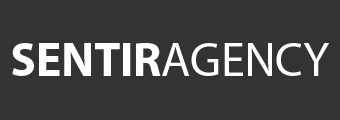
<style>
.page{position:relative;width:340px;height:120px;background:#333333}
.page>*{position:absolute;margin:0}
.t1{font:48.2px "MyriadPro-Bold";letter-spacing:-0.01em;color:#ffffff}
.t2{font:48.2px "MyriadPro-Regular";letter-spacing:-0.01em;color:#ffffff}
</style>
<div class="page">
<p class="t1" style="left:12px;top:43px;width:317px;height:33px">SENTIR<span class="t2">AGENCY</span></p>
</div>
